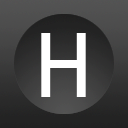
<style>
.page{position:relative;width:128px;height:128px}
.page>*{position:absolute;margin:0}
.t1{font:100px "Consolas";color:#ffffff}
</style>
<div class="page">
<p class="t1" style="left:41px;top:33px;width:45px;height:64px">H</p>
</div>
